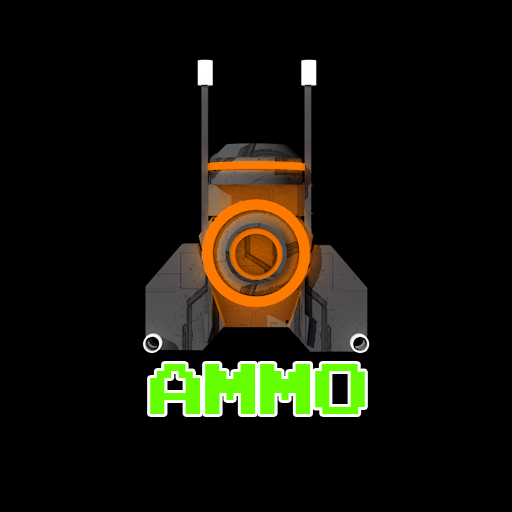
<style>
.page{position:relative;width:512px;height:512px;background:#000000}
.page>*{position:absolute;margin:0}
.t1{font:100px "ArcadeClassic";color:#66ff00}
</style>
<div class="page">
<p class="t1" style="left:150px;top:364px;width:215px;height:50px">Ammo</p>
</div>
